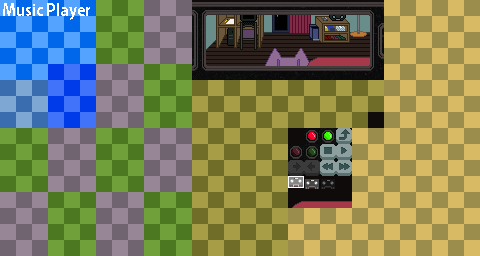
<style>
.page{position:relative;width:480px;height:256px}
.page>*{position:absolute;margin:0}
.t1{font:16px "KozGoPr6N-Bold";color:#ffffff}
</style>
<div class="page">
<p class="t1" style="left:3px;top:3px;width:87px;height:17px">Music Player</p>
</div>
